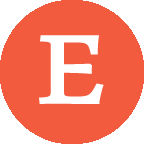
<style>
.page{position:relative;width:144px;height:144px;background:#f35b3f}
.page>*{position:absolute;margin:0}
.t1{font:138.2px "ArabicTypesetting";letter-spacing:0.1em;color:#ffffff;font-weight:bold;scale:1.2 1}
</style>
<div class="page">
<p class="t1" style="left:39px;top:35px;width:65px;height:69px">E</p>
</div>
